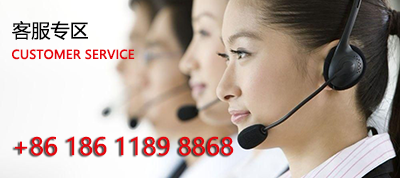
<style>
.page{position:relative;width:400px;height:178px}
.page>*{position:absolute;margin:0}
.t1{font:19.2px "MicrosoftYaHei";color:#010101}
.t2{font:12px "MicrosoftYaHei";color:#e6050d;font-weight:bold}
.t3{font:24px "MicrosoftYaHei";color:#e6050d}
</style>
<div class="page">
<p class="t1" style="left:12px;top:21px;width:76px;height:19px">客服专区</p>
<p class="t2" style="left:12px;top:49px;width:123px;height:11px">CUSTOMER SERVICE</p>
<p class="t3" style="left:15px;top:136px;width:219px;height:20px">+86 186 1189 8868</p>
</div>
